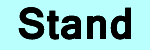
<style>
.page{position:relative;width:150px;height:50px;background:#b8fffd}
.page>*{position:absolute;margin:0}
.t1{font:48px "Vrinda-Bold";color:#000000}
</style>
<div class="page">
<p class="t1" style="left:18px;top:7px;width:113px;height:33px">Stand</p>
<p class="t1" style="left:18px;top:7px;width:113px;height:33px">Stand</p>
<p class="t1" style="left:18px;top:7px;width:113px;height:33px">Stand</p>
</div>
